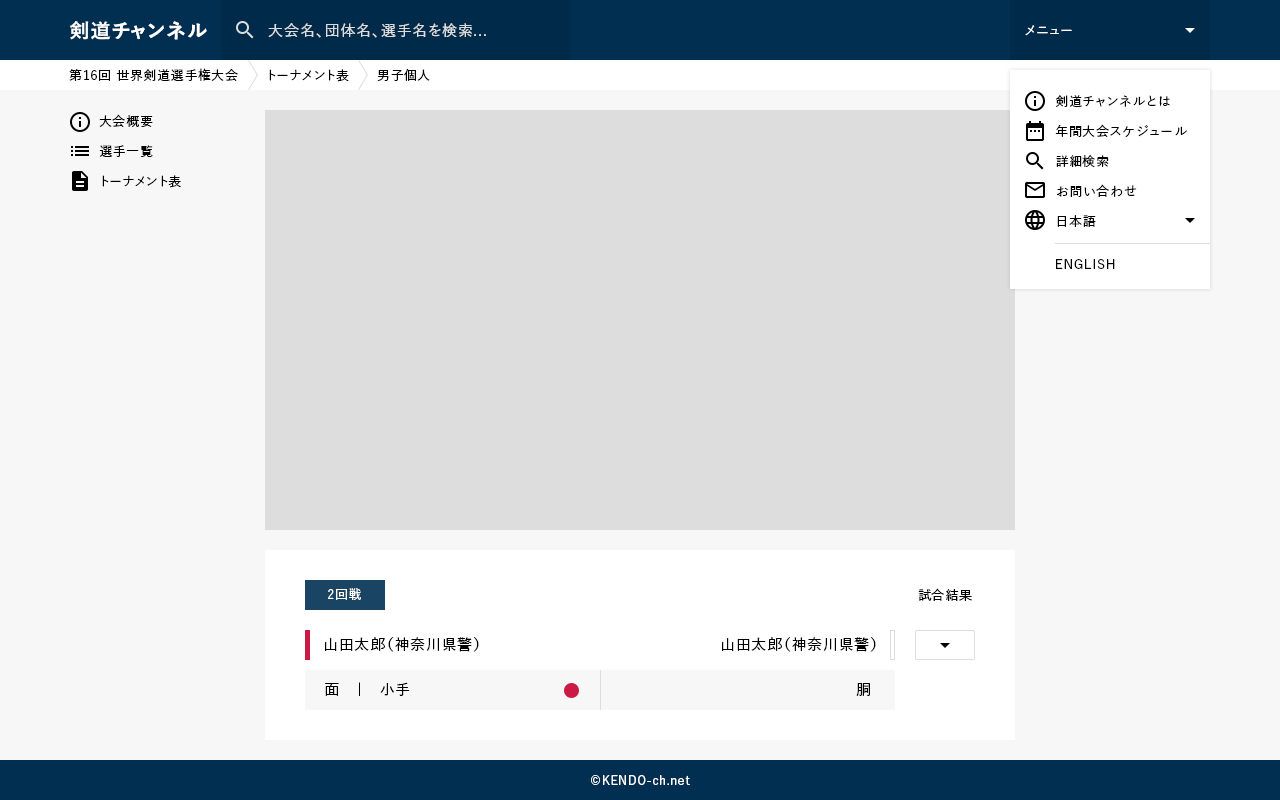
<style>
.page{position:relative;width:1280px;height:800px;background:#f7f7f7}
.page>*{position:absolute;margin:0}
.t1{font:20px "YuGo-Bold";letter-spacing:0.05em;color:#ffffff}
.t2{font:15px "YuGo-Medium";letter-spacing:0.05em;color:#dddddd}
.t3{font:13px "YuGo-Medium";letter-spacing:0.05em;color:#ffffff}
.t4{font:13px "YuGo-Medium";letter-spacing:0.05em;color:#000000}
.t5{font:13px/30px "YuGo-Medium";letter-spacing:0.05em;color:#000000}
.t6{font:15px "YuGo-Medium";letter-spacing:0.05em;color:#000000}
.t7{font:12px "YuGo-Medium";letter-spacing:0.05em;color:#ffffff}
</style>
<div class="page">
<p class="t1" style="left:70px;top:21px;width:137px;height:19px">剣道チャンネル</p>
<p class="t2" style="left:268px;top:23px;width:218px;height:15px">大会名、団体名、選手名を検索...</p>
<p class="t3" style="left:1025px;top:25px;width:47px;height:11px">メニュー</p>
<p class="t4" style="left:69px;top:68px;width:361px;height:14px">第16回 世界剣道選手権大会　　トーナメント表　　男子個人</p>
<p class="t5" style="left:1055px;top:95px;width:132px;height:132px">剣道チャンネルとは<br>年間大会スケジュール<br>詳細検索<br>お問い合わせ<br>日本語</p>
<p class="t5" style="left:99px;top:114px;width:82px;height:74px">大会概要<br>選手一覧<br>トーナメント表</p>
<p class="t4" style="left:1056px;top:259px;width:59px;height:10px">ENGLISH</p>
<p class="t3" style="left:328px;top:588px;width:33px;height:12px">2回戦</p>
<p class="t4" style="left:918px;top:588px;width:54px;height:13px">試合結果</p>
<p class="t6" style="left:325px;top:637px;width:154px;height:15px">山田太郎（神奈川県警）</p>
<p class="t6" style="left:722px;top:637px;width:154px;height:15px">山田太郎（神奈川県警）</p>
<p class="t6" style="left:325px;top:682px;width:85px;height:14px">面　｜　小手</p>
<p class="t6" style="left:856px;top:683px;width:14px;height:13px">胴</p>
<p class="t7" style="left:591px;top:775px;width:99px;height:10px">©KENDO-ch.net</p>
</div>
